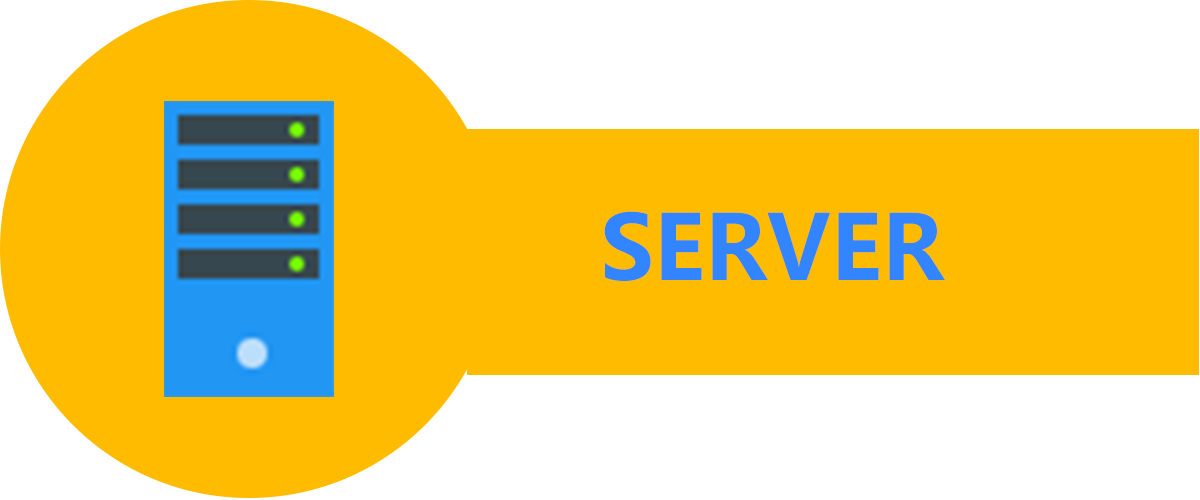
<style>
.page{position:relative;width:1200px;height:500px;background:#ffbb00}
.page>*{position:absolute;margin:0}
.t1{font:89.1px "MicrosoftYaHei-Bold";color:#3285ff}
</style>
<div class="page">
<p class="t1" style="left:604px;top:211px;width:341px;height:70px">SERVER</p>
</div>
